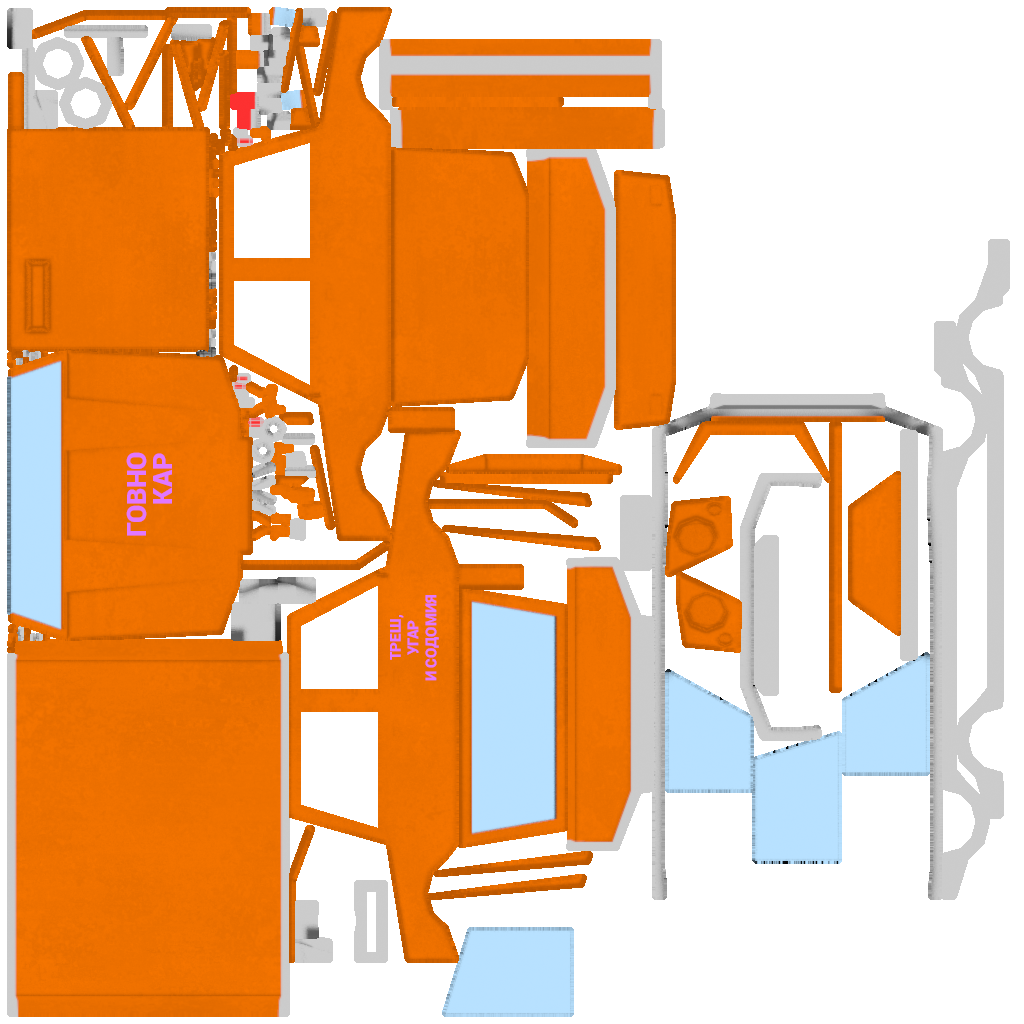
<style>
.page{position:relative;width:1024px;height:1024px;background:#ffffff}
.page>*{position:absolute;margin:0}
.t1{font:26.6px "Roboto-Black";color:#e177ff;text-transform:uppercase}
.t2{font:14.9px "Roboto-Black";color:#e177ff;text-transform:uppercase}
</style>
<div class="page">
<p class="t1" style="left:126px;top:452px;width:21px;height:84px;rotate:-90deg">Говно</p>
<p class="t1" style="left:153px;top:453px;width:19px;height:51px;rotate:-90deg">Кар</p>
<p class="t2" style="left:390px;top:595px;width:49px;height:86px;text-align:center;rotate:-90deg">Треш,<br>угар<br>и содомия</p>
</div>
